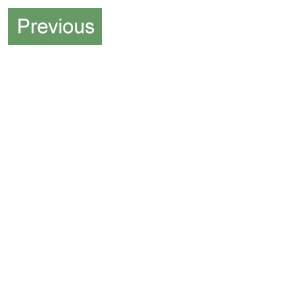
<style>
.page{position:relative;width:300px;height:300px;background:#ffffff}
.page>*{position:absolute;margin:0}
.t1{font:20px "ArialMT";color:#fefefe}
</style>
<div class="page">
<p class="t1" style="left:18px;top:18px;width:76px;height:16px">Previous</p>
</div>
